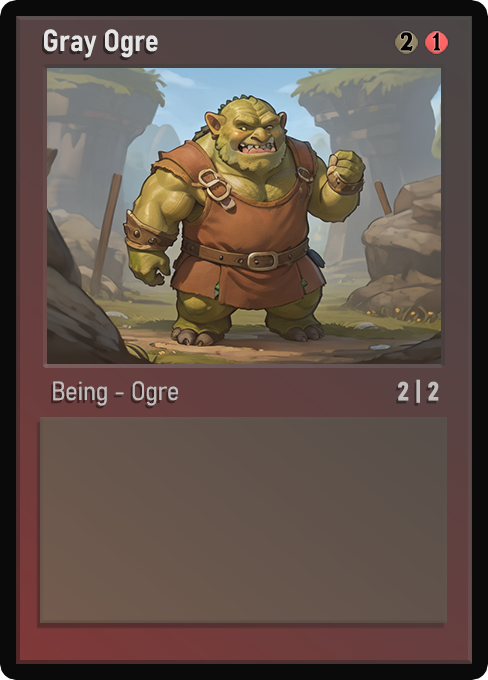
<style>
.page{position:relative;width:488px;height:680px}
.page>*{position:absolute;margin:0}
.t1{font:30px "Bahnschrift-SemiBoldSemiCondensed";color:#f2f2f2;font-weight:bold}
.t2{font:25px "WTRRoycroft";color:#000000;font-weight:bold;scale:1.09 1}
.t3{font:26px "Bahnschrift-LightSemiCondensed";color:#c8c8c8;font-weight:bold}
.t4{font:26px "Bahnschrift-BoldSemiCondensed";color:#c1bdbd;font-weight:bold}
</style>
<div class="page">
<p class="t1" style="left:44px;top:29px;width:114px;height:29px;opacity:0.9">Gray Ogre</p>
<p class="t2" style="left:400px;top:32px;width:13px;height:19px">2</p>
<p class="t2" style="left:432px;top:32px;width:9px;height:19px">1</p>
<p class="t3" style="left:53px;top:381px;width:125px;height:25px;opacity:0.9">Being - Ogre</p>
<p class="t4" style="left:398px;top:379px;width:41px;height:24px">2 | 2</p>
</div>
